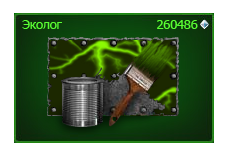
<style>
.page{position:relative;width:231px;height:161px;background:#ffffff}
.page>*{position:absolute;margin:0}
.t1{font:12.5px "Tahoma";color:#59fe32}
</style>
<div class="page">
<p class="t1" style="left:22px;top:20px;width:40px;height:9px">Эколог</p>
<p class="t1" style="left:157px;top:20px;width:41px;height:9px">260486</p>
</div>
